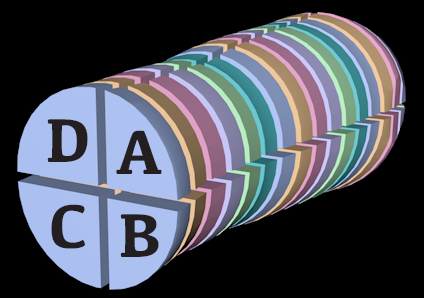
<style>
.page{position:relative;width:424px;height:298px;background:#000000}
.page>*{position:absolute;margin:0}
.t1{font:64px "Kefa-Bold";color:#231f20}
</style>
<div class="page">
<p class="t1" style="left:47px;top:119px;width:41px;height:43px">D</p>
<p class="t1" style="left:116px;top:130px;width:46px;height:44px">A</p>
<p class="t1" style="left:51px;top:204px;width:34px;height:45px">C</p>
<p class="t1" style="left:120px;top:214px;width:39px;height:43px">B</p>
</div>
